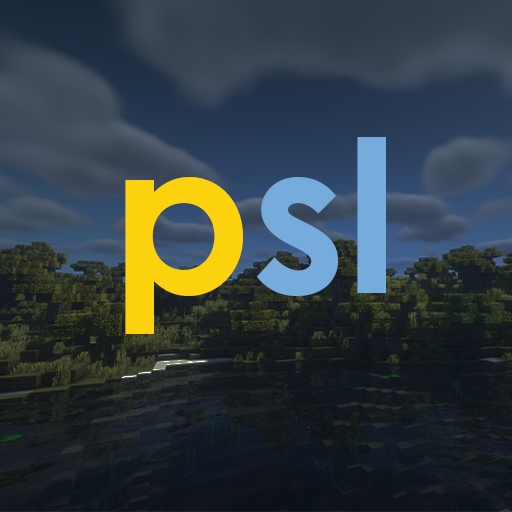
<style>
.page{position:relative;width:512px;height:512px}
.page>*{position:absolute;margin:0}
.t1{font:213.6px "CenturyGothicPro-Bold";color:#76acdc}
.t2{font:213.6px "CenturyGothicPro-Bold";color:#fcd20f}
</style>
<div class="page">
<p class="t1" style="left:125px;top:137px;width:261px;height:197px"><span class="t2">p</span>sl</p>
</div>
